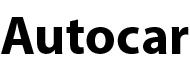
<style>
.page{position:relative;width:190px;height:70px;background:#ffffff}
.page>*{position:absolute;margin:0}
.t1{font:53.7px "MyriadPro-Bold";color:#000000}
</style>
<div class="page">
<p class="t1" style="left:1px;top:17px;width:188px;height:37px">Autocar</p>
</div>
